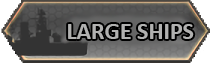
<style>
.page{position:relative;width:210px;height:63px}
.page>*{position:absolute;margin:0}
.t1{font:24px "Calibri-Bold";color:#b1b1b0}
</style>
<div class="page">
<p class="t1" style="left:68px;top:24px;width:126px;height:15px">LARGE SHIPS</p>
</div>
